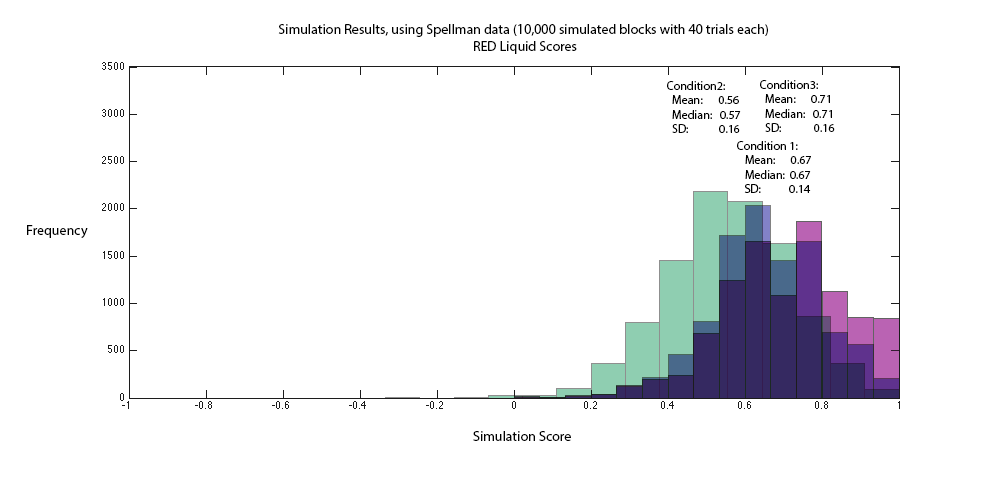
<style>
.page{position:relative;width:993px;height:504px;background:#ffffff}
.page>*{position:absolute;margin:0}
.t1{font:14px "MyriadPro-Regular";color:#000000}
.t2{font:12px "MyriadPro-Regular";color:#000000}
</style>
<div class="page">
<p class="t1" style="left:278px;top:24px;width:490px;height:30px;text-align:center">Simulation Results, using Spellman data (10,000 simulated blocks with 40 trials each) <br>RED Liquid Scores</p>
<p class="t2" style="left:667px;top:81px;width:74px;height:52px">Condition2:<br>  Mean:       0.56<br>  Median:   0.57<br>  SD:            0.16</p>
<p class="t2" style="left:760px;top:80px;width:75px;height:52px">Condition3:<br>  Mean:      0.71<br>  Median:   0.71<br>  SD:         0.16</p>
<p class="t2" style="left:737px;top:141px;width:74px;height:52px">Condition 1:<br>   Mean:      0.67<br>   Median:  0.67<br>   SD:           0.14</p>
<p class="t1" style="left:27px;top:225px;width:61px;height:13px">Frequency</p>
<p class="t1" style="left:473px;top:431px;width:98px;height:10px">Simulation Score</p>
</div>
